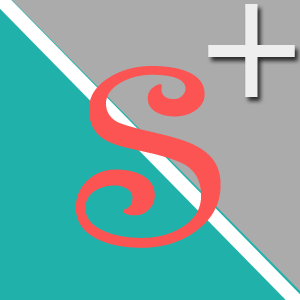
<style>
.page{position:relative;width:300px;height:300px;background:#20b2aa}
.page>*{position:absolute;margin:0}
.t1{font:282.8px "Harrington";color:#eeeeee}
.t2{font:364.4px "Harrington";color:#fc5353}
</style>
<div class="page">
<p class="t1" style="left:208px;top:4px;width:87px;height:93px">+</p>
<p class="t2" style="left:75px;top:66px;width:146px;height:182px">s</p>
</div>
